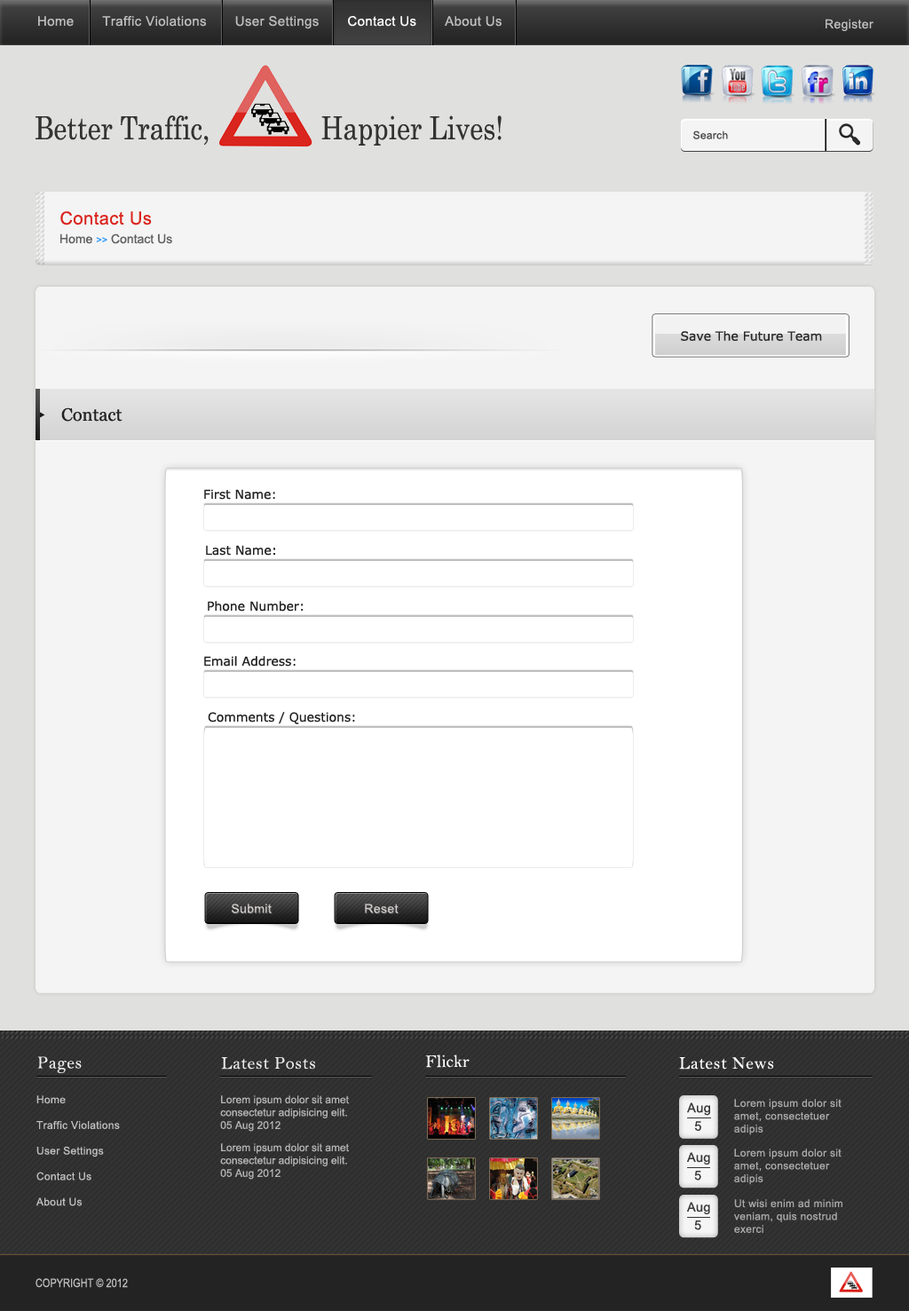
<style>
.page{position:relative;width:909px;height:1311px;background:#f4f4f4}
.page>*{position:absolute;margin:0}
.t1{font:13.3px "ArialMT";letter-spacing:0.025em;color:#c0bfbf}
.t2{font:13.3px "ArialMT";letter-spacing:0.025em;color:#ffffff}
.t3{font:12.4px "ArialMT";letter-spacing:0.025em;color:#c0bfbf}
.t4{font:32px "Century";color:#333333;scale:0.83 1}
.t5{font:10.7px "ArialMT";letter-spacing:0.025em;color:#474747}
.t6{font:17.8px "ArialMT";letter-spacing:0.025em;color:#da251e}
.t7{font:12.4px "ArialMT";color:#605f5f}
.t8{font:9.8px "ArialMT";color:#2695fc}
.t9{font:12.4px "Verdana";color:#292929}
.t10{font:17.8px "Georgia";color:#222222}
.t11{font:12.4px "Verdana";color:#222222}
.t12{font:12.4px "ArialMT";letter-spacing:0.025em;color:#c2bdbd}
.t13{font:12.4px "ArialMT";letter-spacing:0.025em;color:#cac4c4}
.t14{font:17.8px "BellMT";letter-spacing:0.025em;color:#eaeaea}
.t15{font:17.8px "BellMT";color:#fbfdfc}
.t16{font:17.8px "BellMT";letter-spacing:0.025em;color:#fdfcfc}
.t17{font:10.7px "ArialMT";letter-spacing:0.025em;color:#c0bfbf}
.t18{font:10.7px "ArialMT";color:#b4b4b4}
.t19{font:13px "ArialMT";letter-spacing:0.025em;color:#3a3a3a}
.t20{font:10.7px "ArialMT";letter-spacing:0.025em;color:#a9a9a9}
.t21{font:12.8px "ArialMT";letter-spacing:0.025em;color:#3a3a3a}
.t22{font:11.7px "ArialMT";color:#bdbcbc;scale:0.83 1}
</style>
<div class="page">
<p class="t1" style="left:38px;top:16px;width:464px;height:13px">Home       Traffic Violations       User Settings       <span class="t2">Contact Us </span>      About Us</p>
<p class="t3" style="left:826px;top:19px;width:48px;height:12px">Register</p>
<p class="t4" style="left:36px;top:115px;width:466px;height:31px">Better Traffic,               Happier Lives!</p>
<p class="t5" style="left:693px;top:131px;width:35px;height:8px">Search</p>
<p class="t6" style="left:60px;top:211px;width:92px;height:15px">Contact Us</p>
<p class="t7" style="left:60px;top:234px;width:112px;height:10px">Home <span class="t8">&gt;&gt; </span>Contact Us</p>
<p class="t9" style="left:681px;top:331px;width:141px;height:10px">Save The Future Team</p>
<p class="t10" style="left:61px;top:408px;width:62px;height:14px">Contact</p>
<p class="t11" style="left:204px;top:489px;width:71px;height:11px">First Name:</p>
<p class="t11" style="left:206px;top:545px;width:69px;height:11px">Last Name:</p>
<p class="t11" style="left:208px;top:601px;width:95px;height:11px">Phone Number:</p>
<p class="t11" style="left:204px;top:656px;width:92px;height:11px">Email Address:</p>
<p class="t11" style="left:208px;top:712px;width:147px;height:13px">Comments / Questions:</p>
<p class="t12" style="left:231px;top:904px;width:41px;height:10px">Submit</p>
<p class="t13" style="left:365px;top:904px;width:34px;height:10px">Reset</p>
<p class="t14" style="left:37px;top:1057px;width:45px;height:17px">Pages</p>
<p class="t14" style="left:221px;top:1058px;width:94px;height:12px">Latest Posts</p>
<p class="t15" style="left:425px;top:1055px;width:45px;height:13px">Flickr</p>
<p class="t16" style="left:679px;top:1058px;width:95px;height:12px">Latest News</p>
<p class="t17" style="left:36px;top:1096px;width:84px;height:111px">Home<br>       <br>Traffic Violations<br>      <br>User Settings<br>       <br>Contact Us<br>      <br>About Us</p>
<p class="t18" style="left:220px;top:1096px;width:129px;height:36px">Lorem ipsum dolor sit amet <br>consectetur adipisicing elit.<br>05 Aug 2012</p>
<p class="t19" style="left:687px;top:1103px;width:23px;height:13px">Aug</p>
<p class="t20" style="left:734px;top:1099px;width:108px;height:37px">Lorem ipsum dolor sit <br>amet, consectetuer <br>adipis</p>
<p class="t19" style="left:694px;top:1121px;width:7px;height:10px">5</p>
<p class="t18" style="left:220px;top:1144px;width:129px;height:36px">Lorem ipsum dolor sit amet <br>consectetur adipisicing elit.<br>05 Aug 2012</p>
<p class="t21" style="left:687px;top:1153px;width:23px;height:12px">Aug</p>
<p class="t20" style="left:734px;top:1149px;width:108px;height:36px">Lorem ipsum dolor sit <br>amet, consectetuer <br>adipis</p>
<p class="t21" style="left:694px;top:1171px;width:7px;height:10px">5</p>
<p class="t21" style="left:687px;top:1202px;width:23px;height:13px">Aug</p>
<p class="t20" style="left:734px;top:1200px;width:109px;height:33px">Ut wisi enim ad minim <br>veniam, quis nostrud <br>exerci</p>
<p class="t21" style="left:694px;top:1221px;width:7px;height:10px">5</p>
<p class="t22" style="left:36px;top:1279px;width:92px;height:9px">COPYRIGHT © 2012</p>
</div>
